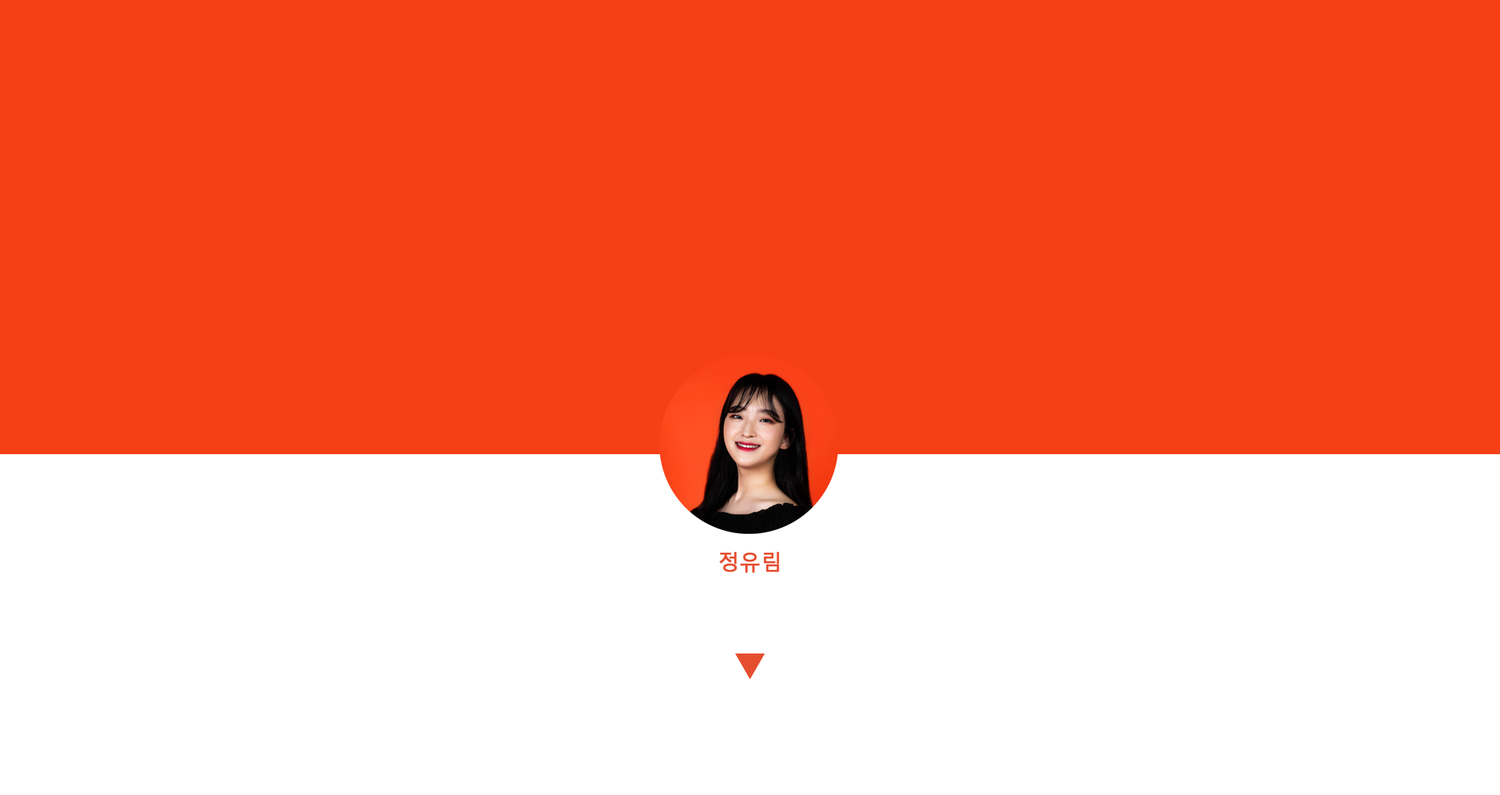
<style>
.page{position:relative;width:1500px;height:795px;background:#f63f14}
.page>*{position:absolute;margin:0}
.t1{font:20.8px "MalgunGothic";color:#e54e2f;font-weight:bold}
</style>
<div class="page">
<p class="t1" style="left:720px;top:552px;width:60px;height:21px">정유림</p>
</div>
